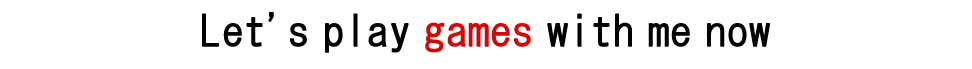
<style>
.page{position:relative;width:972px;height:69px;background:#ffffff}
.page>*{position:absolute;margin:0}
.t1{font:41.7px "HGGothicM";color:#000000;font-weight:bold}
.t2{font:41.7px "HGGothicM";color:#d10707;font-weight:bold}
</style>
<div class="page">
<p class="t1" style="left:202px;top:12px;width:568px;height:41px;text-align:center">Let's play <span class="t2">games </span>with me now<br>Let's play games with me now</p>
</div>
